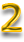
<style>
.page{position:relative;width:24px;height:42px;background:#ffffff}
.page>*{position:absolute;margin:0}
.t1{font:35.8px "Tahoma";scale:1.17 1}
</style>
<div class="page">
<p class="t1" style="left:2px;top:4px;width:20px;height:27px">2</p>
</div>
